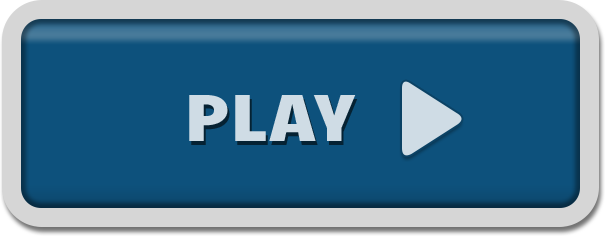
<style>
.page{position:relative;width:606px;height:237px;background:#0d517c}
.page>*{position:absolute;margin:0}
.t1{font:66.7px "PaytoneOne";letter-spacing:0.03em;color:#cfdce5}
</style>
<div class="page">
<p class="t1" style="left:189px;top:95px;width:167px;height:46px">PLAY</p>
</div>
